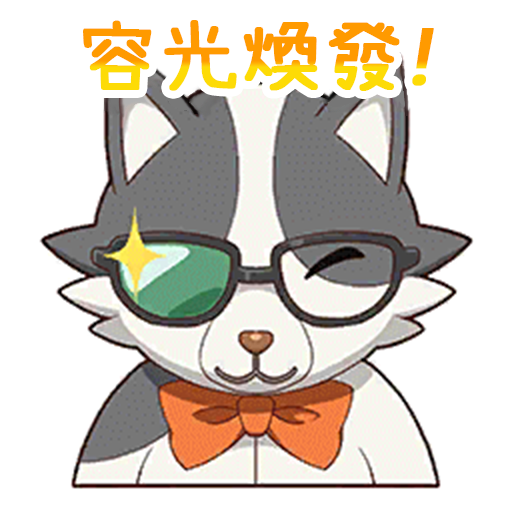
<style>
.page{position:relative;width:512px;height:512px;background:#ffffff}
.page>*{position:absolute;margin:0}
.t1{font:80px "SetoFont";font-weight:bold}
.t2{font:80px "YuGothicUI-Bold";font-weight:bold;font-style:italic}
</style>
<div class="page">
<p class="t1" style="left:83px;top:20px;width:351px;height:71px">容光煥發<span class="t2">!</span></p>
</div>
